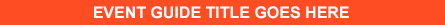
<style>
.page{position:relative;width:445px;height:25px;background:#ff4d23}
.page>*{position:absolute;margin:0}
.t1{font:16px "Arial-BoldMT";color:#ffffff;text-transform:uppercase}
</style>
<div class="page">
<p class="t1" style="left:94px;top:6px;width:255px;height:13px">event guide title goes here</p>
</div>
